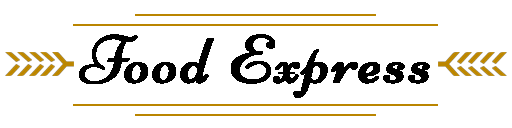
<style>
.page{position:relative;width:512px;height:128px;background:#ffffff}
.page>*{position:absolute;margin:0}
.t1{font:68px "Niconne-Regular";letter-spacing:0.025em;color:#000000;font-weight:bold;scale:0.97 1}
</style>
<div class="page">
<p class="t1" style="left:79px;top:34px;width:351px;height:64px">Food Express</p>
</div>
